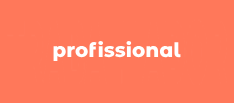
<style>
.page{position:relative;width:234px;height:103px;background:#ff785a}
.page>*{position:absolute;margin:0}
.t1{font:20px "MontserratAlternates-ExtraBold";color:#ffffff}
</style>
<div class="page">
<p class="t1" style="left:53px;top:40px;width:128px;height:21px">profissional</p>
</div>
